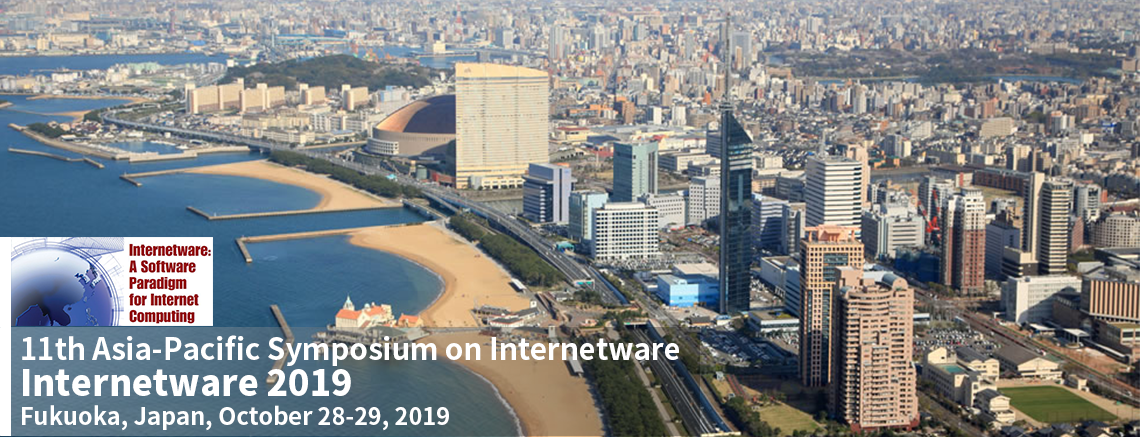
<style>
.page{position:relative;width:1140px;height:437px}
.page>*{position:absolute;margin:0}
.t1{font:30px/30px "SourceHanSans-Bold";color:#ffffff}
.t2{font:36px/40px "SourceHanSans-Heavy";color:#ffffff}
.t3{font:24px/40px "SourceHanSans-Bold";color:#ffffff}
</style>
<div class="page">
<p class="t1" style="left:22px;top:335px;width:657px;height:96px">11th Asia-Pacific Symposium on Internetware<br><span class="t2">Internetware 2019<br></span><span class="t3">Fukuoka, Japan, October 28-29, 2019</span></p>
</div>
